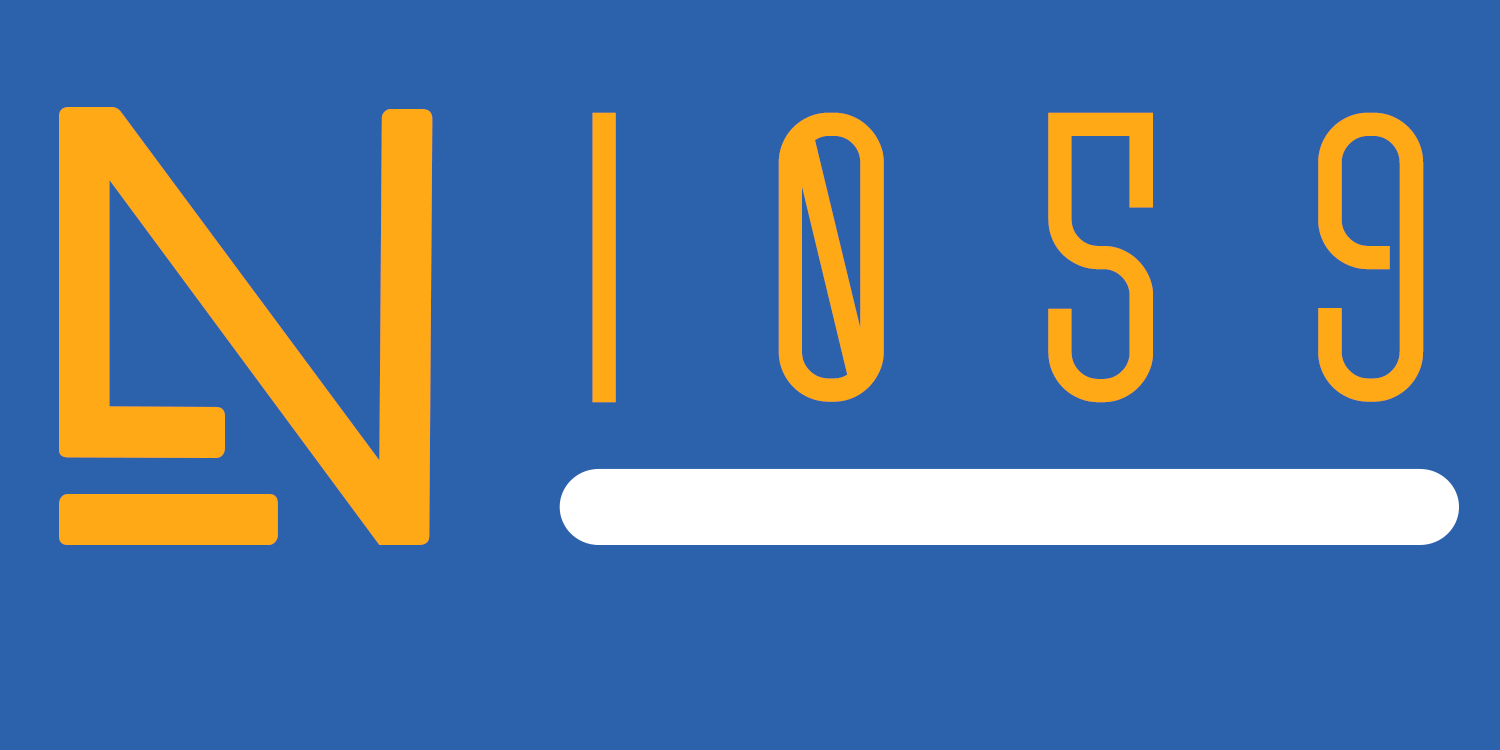
<style>
.page{position:relative;width:1500px;height:750px;background:#2c62ac}
.page>*{position:absolute;margin:0}
.t1{font:608.3px "BEYNO";color:#ffa916}
.t2{font:389.3px "ScantypeBoldPERSONALUSE";color:#ffa916}
</style>
<div class="page">
<p class="t1" style="left:59px;top:107px;width:374px;height:438px">N</p>
<p class="t2" style="left:592px;top:112px;width:832px;height:291px">9  5  0  1</p>
</div>
